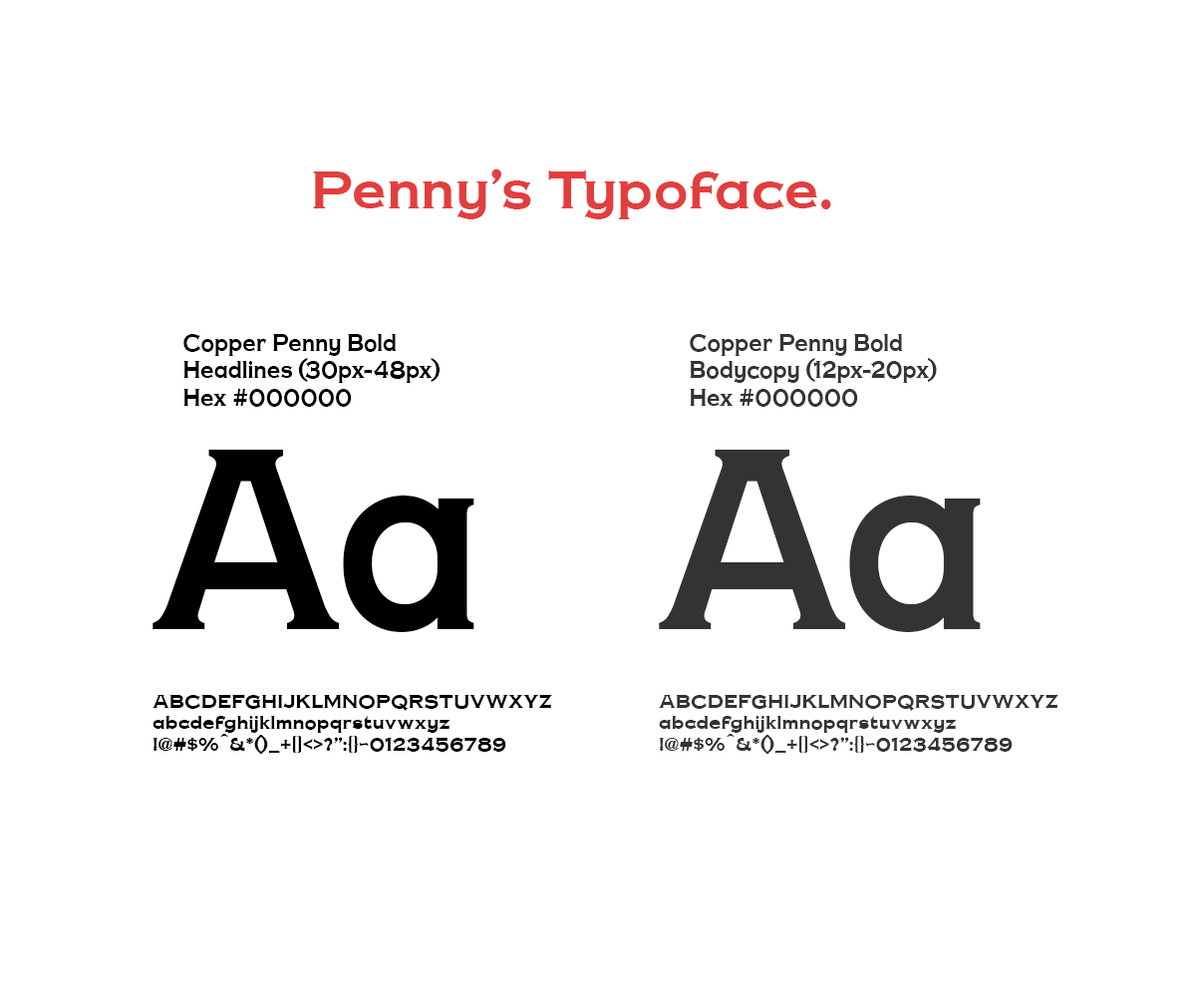
<style>
.page{position:relative;width:1196px;height:997px;background:#ffffff}
.page>*{position:absolute;margin:0}
.t1{font:51px "CopperPennyDTPNormal";color:#e33e3e}
.t2{font:22.9px "CopperPennyDTPNormal";color:#000000;scale:0.86 1}
.t3{font:22.9px "CopperPennyDTPNormal";color:#333333;scale:0.86 1}
.t4{font:247px "CopperPennyDTPNormal";color:#000000;scale:0.85 1}
.t5{font:247px "CopperPennyDTPNormal";color:#333333;scale:0.85 1}
.t6{font:17.9px "CopperPennyDTPNormal";color:#000000}
.t7{font:17.9px "CopperPennyDTPNormal";color:#333333}
</style>
<div class="page">
<p class="t1" style="left:313px;top:168px;width:518px;height:51px">Penny’s Typoface.</p>
<p class="t2" style="left:183px;top:334px;width:258px;height:73px">Copper Penny Bold<br>Headlines (30px-48px)<br>Hex #000000</p>
<p class="t3" style="left:690px;top:334px;width:247px;height:73px">Copper Penny Bold<br>Bodycopy (12px-20px)<br>Hex #000000</p>
<p class="t4" style="left:153px;top:450px;width:321px;height:182px">Aa</p>
<p class="t5" style="left:659px;top:450px;width:322px;height:182px">Aa</p>
<p class="t6" style="left:153px;top:695px;width:399px;height:59px">ABCDEFGHIJKLMNOPQRSTUVWXYZ<br>abcdefghijklmnopqrstuvwxyz <br>!@#$%^&amp;*()_+[]&lt;&gt;?”:{}~0123456789</p>
<p class="t7" style="left:659px;top:695px;width:400px;height:59px">ABCDEFGHIJKLMNOPQRSTUVWXYZ<br>abcdefghijklmnopqrstuvwxyz <br>!@#$%^&amp;*()_+[]&lt;&gt;?”:{}~0123456789</p>
</div>
